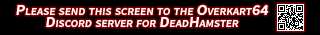
<style>
.page{position:relative;width:320px;height:35px;background:#000000}
.page>*{position:absolute;margin:0}
.t1{font:15px/12px "FallingSkySeBdObl";color:#fefefe;font-variant:small-caps}
</style>
<div class="page">
<p class="t1" style="left:16px;top:5px;width:253px;height:22px;text-align:center">Please send this screen to the Overkart64<br>Discord server for DeadHamster</p>
</div>
